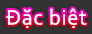
<style>
.page{position:relative;width:92px;height:34px;background:#333333}
.page>*{position:absolute;margin:0}
.t1{font:22px "Corbel";letter-spacing:0.035em;color:#ffffff}
</style>
<div class="page">
<p class="t1" style="left:6px;top:8px;width:81px;height:20px">Đặc biệt</p>
</div>
